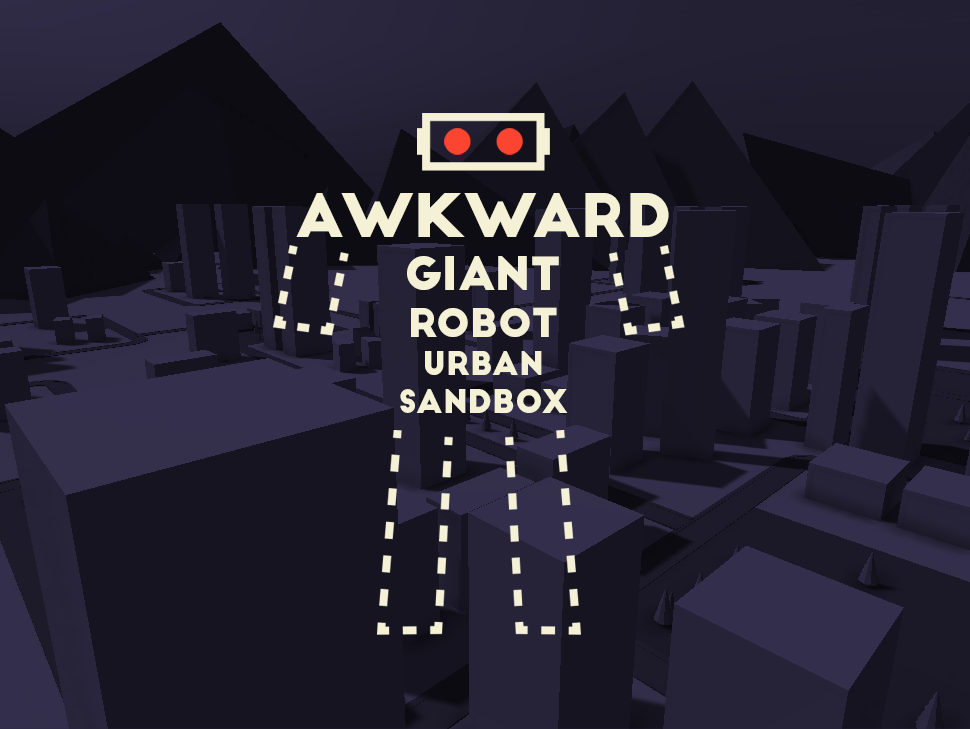
<style>
.page{position:relative;width:970px;height:729px;background:#161421}
.page>*{position:absolute;margin:0}
.t1{font:31.6px "BigJohn";color:#f4f1d6}
.t2{font:44.8px "BigJohn";color:#f4f1d6}
.t3{font:58.4px/60.8px "BigJohn";color:#f4f1d6}
.t4{font:38.9px "BigJohn";color:#f4f1d6}
</style>
<div class="page">
<p class="t1" style="left:296px;top:193px;width:373px;height:220px;text-align:center"><span class="t2"><br></span><span class="t3">AWKWARD<br></span><span class="t2">GIANT<br></span><span class="t4">ROBOT<br></span>URBAN<br>SANDBOX</p>
</div>
